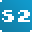
<style>
.page{position:relative;width:32px;height:32px}
.page>*{position:absolute;margin:0}
.t1{font:16px "Early-GameBoy";color:#ffffff}
</style>
<div class="page">
<p class="t1" style="left:2px;top:10px;width:28px;height:12px">S2</p>
</div>
